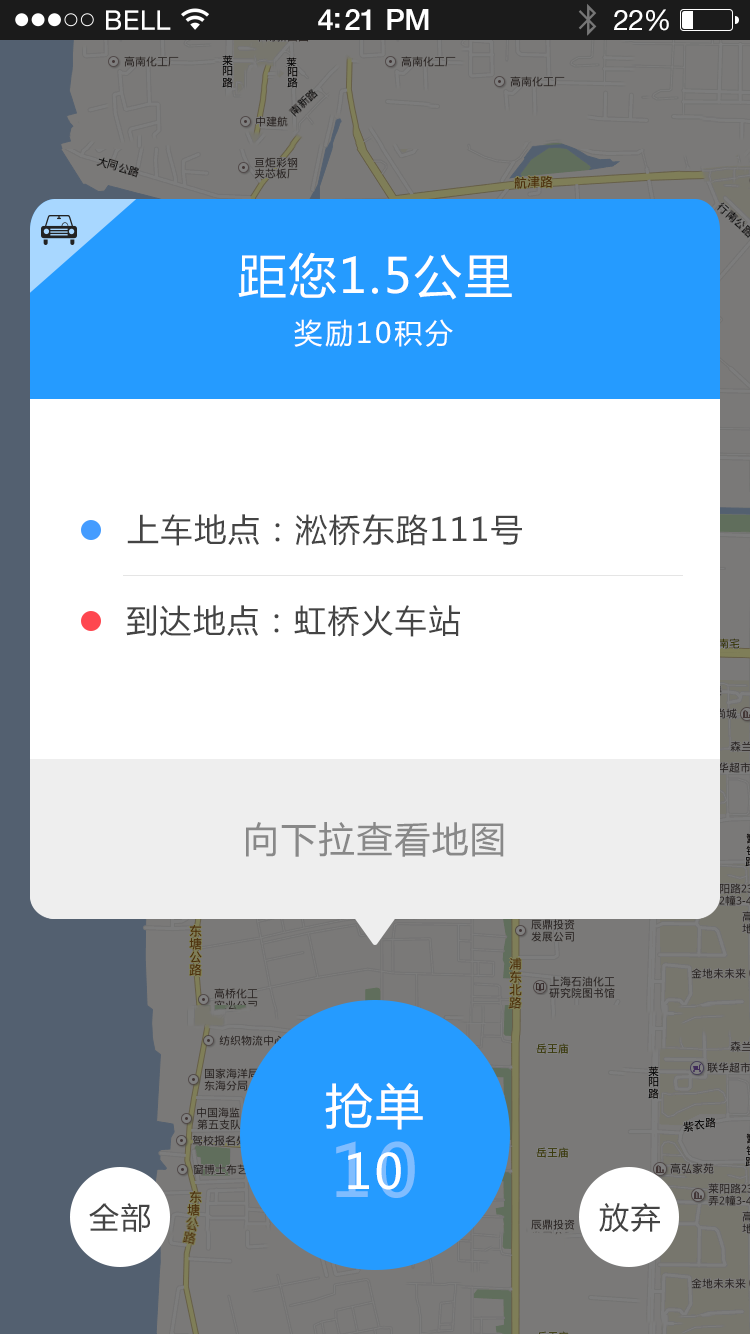
<style>
.page{position:relative;width:750px;height:1334px;background:#ffffff}
.page>*{position:absolute;margin:0}
.t1{font:48px "MicrosoftYaHei";letter-spacing:0.05em;color:#ffffff}
.t2{font:28px "MicrosoftYaHei";letter-spacing:0.1em;color:#ffffff}
.t3{font:32px "MicrosoftYaHei";letter-spacing:0.05em;color:#444444}
.t4{font:36px "MicrosoftYaHei";letter-spacing:0.05em;color:#888888}
.t5{font:72px "MicrosoftYaHei";letter-spacing:0.05em;color:#80bdff}
.t6{font:30px "MicrosoftYaHei";letter-spacing:0.05em;color:#444444}
</style>
<div class="page">
<p class="t1" style="left:238px;top:252px;width:274px;height:48px">距您1.5公里</p>
<p class="t2" style="left:294px;top:319px;width:159px;height:28px">奖励10积分</p>
<p class="t3" style="left:127px;top:514px;width:395px;height:32px">上车地点：淞桥东路111号</p>
<p class="t3" style="left:126px;top:605px;width:334px;height:32px">到达地点：虹桥火车站</p>
<p class="t4" style="left:246px;top:822px;width:258px;height:35px">向下拉查看地图</p>
<p class="t1" style="left:325px;top:1082px;width:98px;height:48px">抢单</p>
<p class="t5" style="left:336px;top:1141px;width:79px;height:57px">10</p>
<p class="t1" style="left:348px;top:1152px;width:53px;height:38px">10</p>
<p class="t6" style="left:89px;top:1203px;width:61px;height:29px">全部</p>
<p class="t6" style="left:599px;top:1203px;width:61px;height:30px">放弃</p>
</div>
